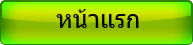
<style>
.page{position:relative;width:193px;height:45px}
.page>*{position:absolute;margin:0}
.t1{font:25px "Tahoma";color:#040404}
</style>
<div class="page">
<p class="t1" style="left:56px;top:9px;width:83px;height:19px">หน้าแรก</p>
</div>
